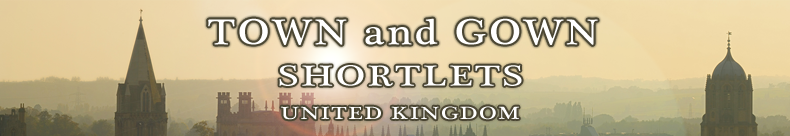
<style>
.page{position:relative;width:790px;height:136px}
.page>*{position:absolute;margin:0}
.t1{font:36.8px "PlantagenetCherokee";letter-spacing:0.07em;color:#ffffff;scale:1.14 1}
.t2{font:29.4px "PlantagenetCherokee";letter-spacing:0.07em;color:#ffffff;scale:1.31 1}
.t3{font:18px "PlantagenetCherokee";letter-spacing:0.07em;color:#ffffff;scale:1.31 1}
</style>
<div class="page">
<p class="t1" style="left:208px;top:18px;width:390px;height:27px">TOWN and GOWN</p>
<p class="t2" style="left:279px;top:65px;width:243px;height:21px">SHORTLETS</p>
<p class="t3" style="left:281px;top:106px;width:238px;height:14px">UNITED KINGDOM</p>
</div>
